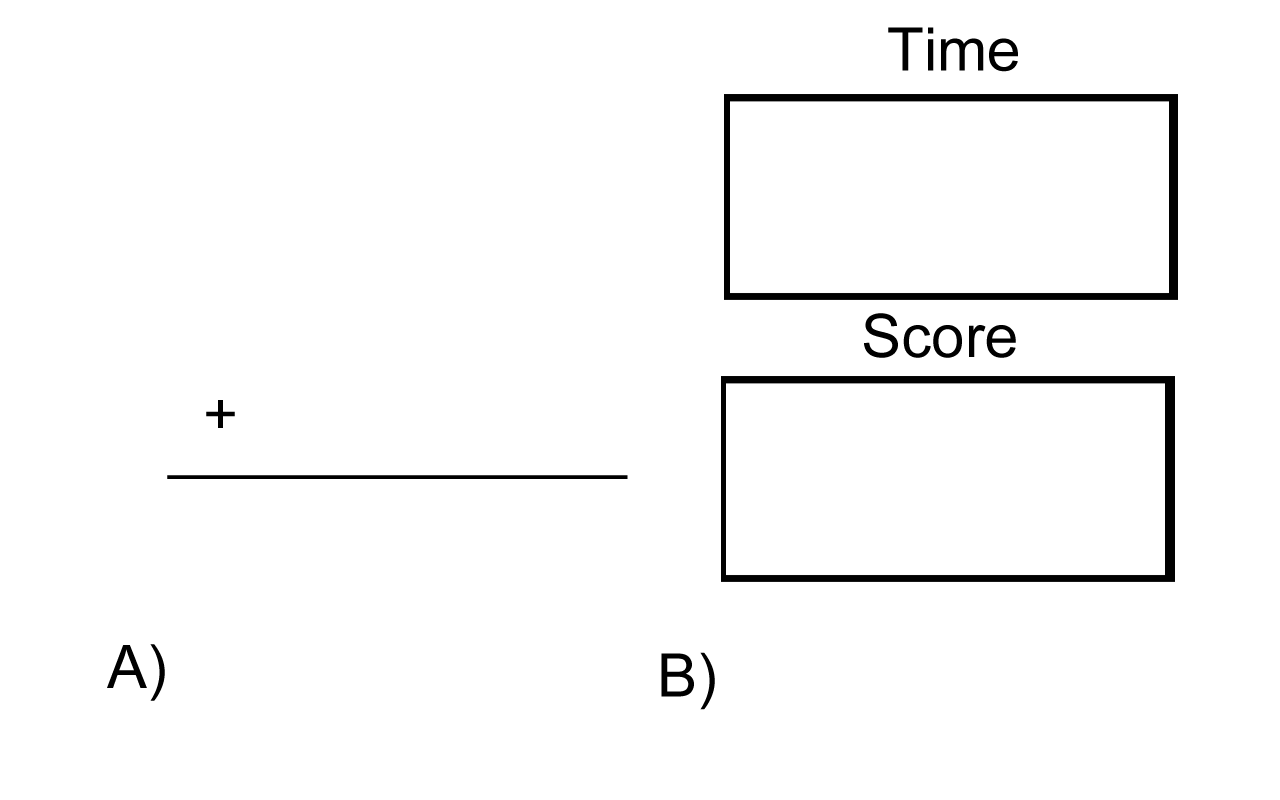
<style>
.page{position:relative;width:1280px;height:800px;background:#ffffff}
.page>*{position:absolute;margin:0}
.t1{font:60px "ArialMT";color:#000000}
.t2{font:58.9px "ArialMT";color:#000000}
</style>
<div class="page">
<p class="t1" style="left:888px;top:27px;width:130px;height:45px">Time</p>
<p class="t1" style="left:864px;top:313px;width:152px;height:45px">Score</p>
<p class="t1" style="left:206px;top:400px;width:29px;height:28px">+</p>
<p class="t2" style="left:167px;top:475px;width:461px;height:4px">______________</p>
<p class="t1" style="left:107px;top:644px;width:58px;height:57px">A)</p>
<p class="t1" style="left:661px;top:652px;width:54px;height:58px">B)</p>
</div>
